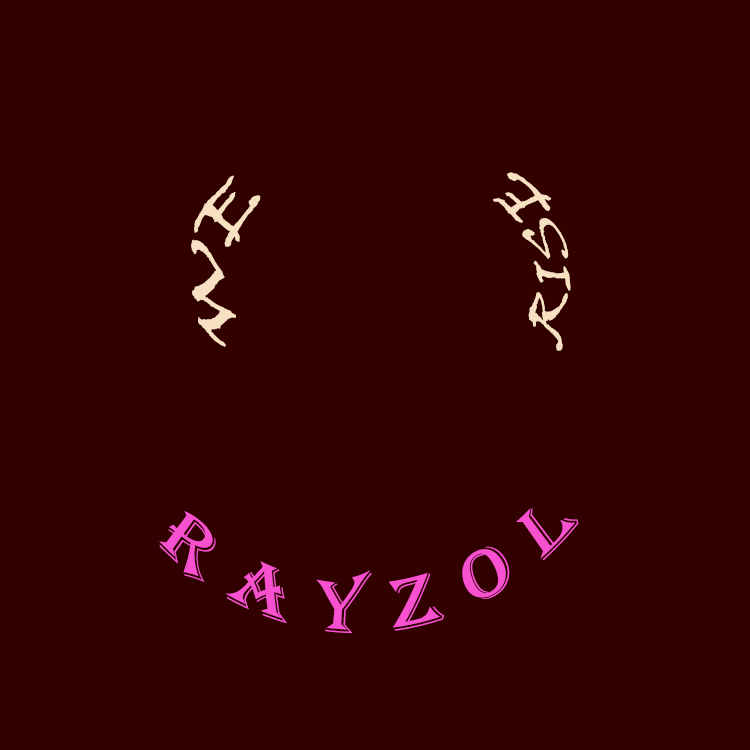
<style>
.page{position:relative;width:750px;height:750px;background:#330000}
.page>*{position:absolute;margin:0}
.t1{font:50px "VinerHandITC";color:#f7e1c2}
.t2{font:60.9px "VinerHandITC";color:#f7e1c2;scale:0.84 1}
.t3{font:75px "Algerian";letter-spacing:0.29em;color:#f751d0;scale:0.87 1}
</style>
<div class="page">
<p class="t1" style="left:493px;top:172px;width:78px;height:179px;rotate:-104deg">RISE</p>
<p class="t2" style="left:191px;top:175px;width:70px;height:172px;rotate:-83deg">WE</p>
<p class="t3" style="left:159px;top:508px;width:420px;height:126px;rotate:-3deg">RAYZOL</p>
</div>
